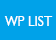
<style>
.page{position:relative;width:56px;height:40px;background:#00a2e9}
.page>*{position:absolute;margin:0}
.t1{font:13.9px "Humanist521BT-Roman";color:#ffffff;scale:0.95 1}
</style>
<div class="page">
<p class="t1" style="left:4px;top:16px;width:49px;height:10px">WP LIST</p>
</div>
